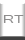
<style>
.page{position:relative;width:25px;height:40px;background:#ffffff}
.page>*{position:absolute;margin:0}
.t1{font:12.2px "Shruti";color:#8e8d8d;scale:1.38 1}
</style>
<div class="page">
<p class="t1" style="left:3px;top:15px;width:21px;height:8px">RT</p>
</div>
